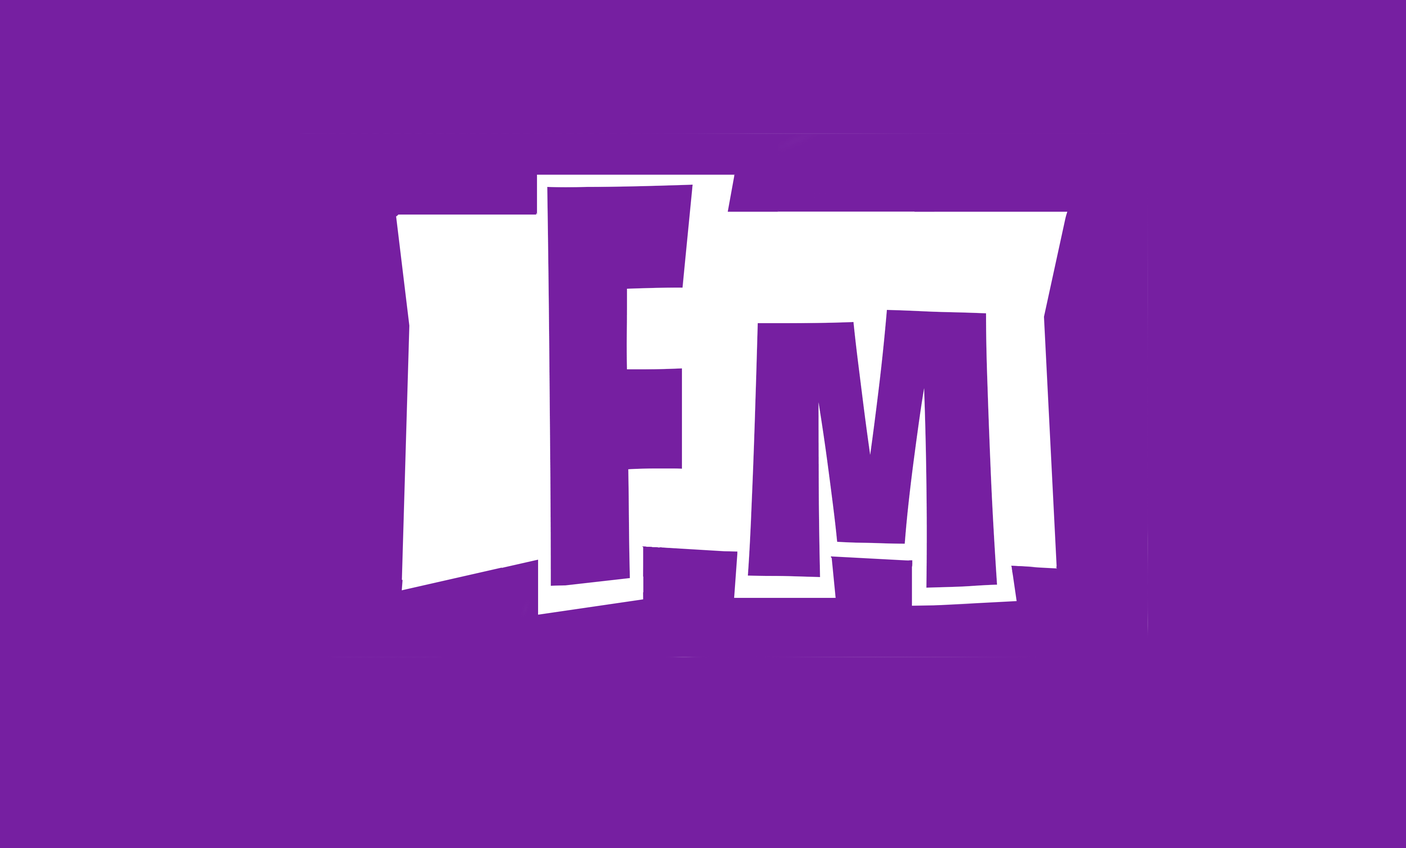
<style>
.page{position:relative;width:1406px;height:848px;background:#761fa1}
.page>*{position:absolute;margin:0}
.t1{font:577.8px "FORTNITEBATTLEFEST";color:#761fa1;scale:0.76 1}
.t2{font:379.7px "FORTNITEBATTLEFEST";color:#761fa1}
</style>
<div class="page">
<p class="t1" style="left:547px;top:185px;width:146px;height:401px">F</p>
<p class="t2" style="left:748px;top:310px;width:249px;height:278px">M</p>
</div>
